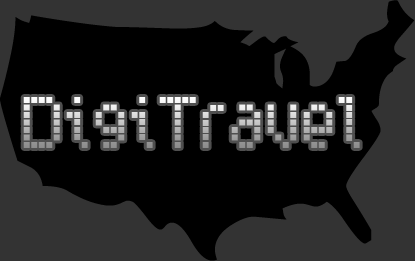
<style>
.page{position:relative;width:415px;height:261px;background:#000000}
.page>*{position:absolute;margin:0}
.t1{font:400px "DingMaps";color:#000000}
.t2{font:60px "SubwayTicker"}
</style>
<div class="page">
<p class="t1" style="left:0px;top:0px;width:415px;height:261px">1</p>
<p class="t2" style="left:23px;top:97px;width:337px;height:51px">DigiTravel</p>
</div>
